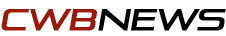
<style>
.page{position:relative;width:226px;height:36px;background:#ffffff}
.page>*{position:absolute;margin:0}
.t1{font:30px "PirulenRg-Regular";color:#000000;font-weight:bold;font-style:italic}
.t2{font:30px "PirulenRg-Regular";color:#9a1a08;font-weight:bold;font-style:italic}
</style>
<div class="page">
<p class="t1" style="left:1px;top:9px;width:225px;height:22px"><span class="t2">CWB</span>NEWS</p>
</div>
